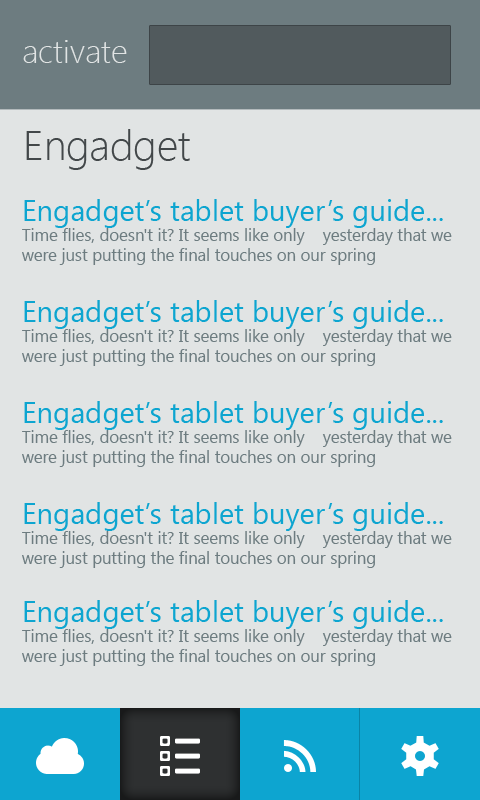
<style>
.page{position:relative;width:480px;height:800px;background:#e1e4e4}
.page>*{position:absolute;margin:0}
.t1{font:33.3px "SegoeUI-Light";color:#e1e4e4}
.t2{font:41.7px "SegoeUI-Light";color:#424749}
.t3{font:41.7px "SegoeUI-Light";color:#0da5d0}
.t4{font:16.7px "SegoeUI";color:#6d7c80}
.t5{font:29.2px "SegoeUI";color:#0da5d0}
</style>
<div class="page">
<p class="t1" style="left:23px;top:40px;width:104px;height:23px">activate</p>
<p class="t2" style="left:26px;top:129px;width:164px;height:41px"><span class="t3">  </span>Engadget</p>
<p class="t4" style="left:22px;top:199px;width:430px;height:66px"><span class="t5">Engadget’s tablet buyer’s guide...<br></span>Time flies, doesn't it? It seems like only    yesterday that we were just putting the final touches on our spring</p>
<p class="t4" style="left:22px;top:300px;width:430px;height:66px"><span class="t5">Engadget’s tablet buyer’s guide...<br></span>Time flies, doesn't it? It seems like only    yesterday that we were just putting the final touches on our spring</p>
<p class="t4" style="left:22px;top:401px;width:430px;height:66px"><span class="t5">Engadget’s tablet buyer’s guide...<br></span>Time flies, doesn't it? It seems like only    yesterday that we were just putting the final touches on our spring</p>
<p class="t4" style="left:22px;top:502px;width:430px;height:66px"><span class="t5">Engadget’s tablet buyer’s guide...<br></span>Time flies, doesn't it? It seems like only    yesterday that we were just putting the final touches on our spring</p>
<p class="t4" style="left:22px;top:600px;width:430px;height:66px"><span class="t5">Engadget’s tablet buyer’s guide...<br></span>Time flies, doesn't it? It seems like only    yesterday that we were just putting the final touches on our spring</p>
</div>
